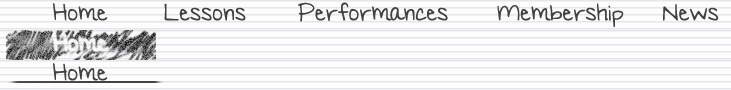
<style>
.page{position:relative;width:731px;height:90px;background:#fdfdfe}
.page>*{position:absolute;margin:0}
.t1{font:24px "MyHandsareHoldingYou";color:#414141}
</style>
<div class="page">
<p class="t1" style="left:53px;top:3px;width:55px;height:18px">Home</p>
<p class="t1" style="left:164px;top:3px;width:82px;height:18px">Lessons</p>
<p class="t1" style="left:298px;top:2px;width:150px;height:20px">Performances</p>
<p class="t1" style="left:497px;top:3px;width:127px;height:24px">Membership</p>
<p class="t1" style="left:663px;top:4px;width:56px;height:17px">News</p>
<p class="t1" style="left:53px;top:63px;width:55px;height:18px">Home</p>
</div>
